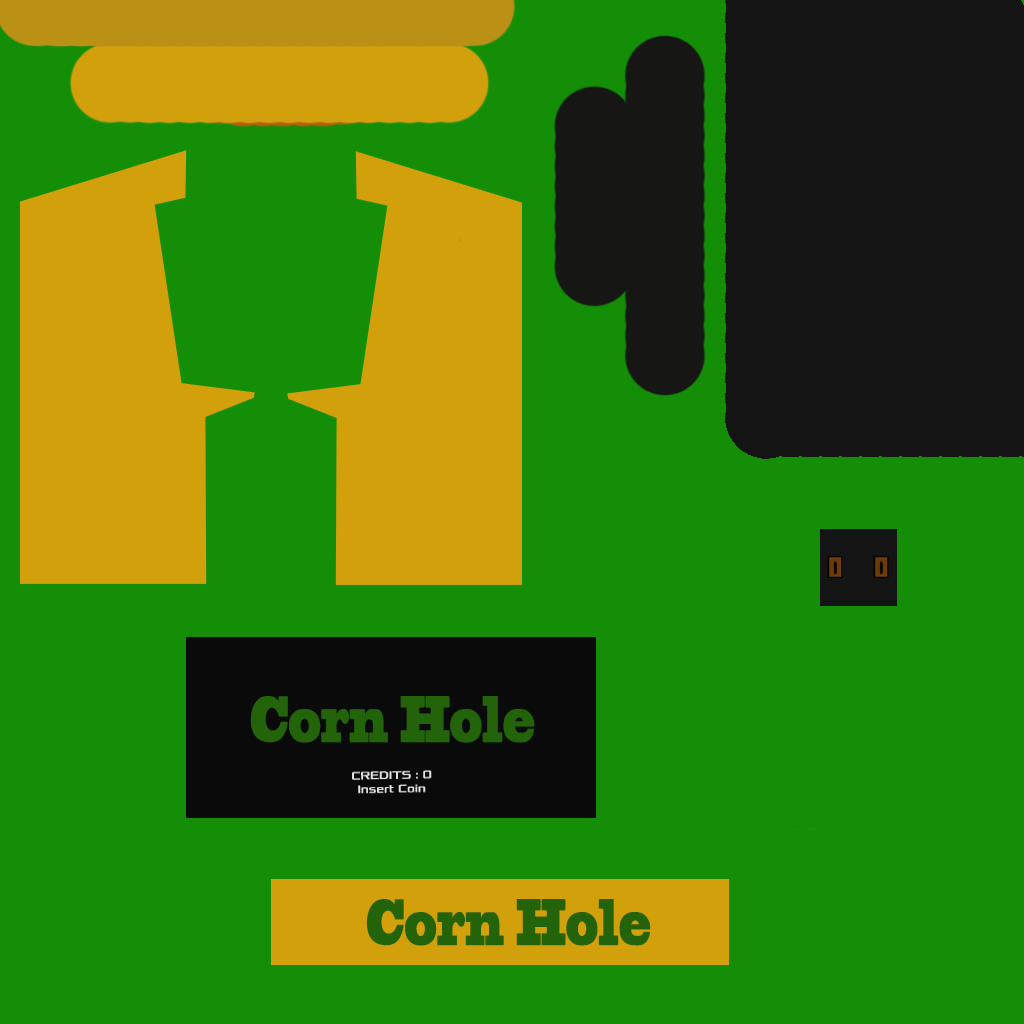
<style>
.page{position:relative;width:1024px;height:1024px;background:#138e06}
.page>*{position:absolute;margin:0}
.t1{font:61.4px "BlackoakStd";color:#23630a;scale:0.4 1}
</style>
<div class="page">
<p class="t1" style="left:250px;top:696px;width:285px;height:47px">Corn Hole</p>
<p class="t1" style="left:366px;top:899px;width:285px;height:47px">Corn Hole</p>
</div>
